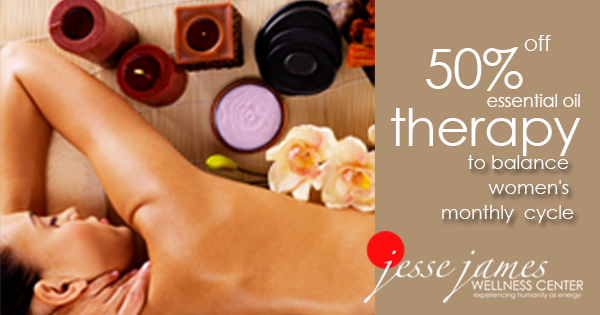
<style>
.page{position:relative;width:600px;height:315px;background:#ae9171}
.page>*{position:absolute;margin:0}
.t1{font:21.8px "CenturyGothic";letter-spacing:-0.02em;color:#fffdfd}
.t2{font:54.4px "CenturyGothic";letter-spacing:-0.02em;color:#fffdfd}
.t3{font:18.1px "CenturyGothic";letter-spacing:-0.02em;color:#fffdfd}
.t4{font:52.4px "CenturyGothic";letter-spacing:-0.02em;color:#fffdfd}
.t5{font:19.4px/12.5px "CenturyGothic";letter-spacing:-0.02em;color:#fffdfd}
</style>
<div class="page">
<p class="t1" style="left:524px;top:35px;width:27px;height:16px">off</p>
<p class="t2" style="left:426px;top:47px;width:97px;height:44px">50%</p>
<p class="t3" style="left:487px;top:94px;width:93px;height:13px">essential oil</p>
<p class="t4" style="left:391px;top:108px;width:190px;height:48px">therapy</p>
<p class="t5" style="left:442px;top:155px;width:132px;height:68px;text-align:right">to balance <br><br>women's <br><br>monthly  cycle</p>
</div>
